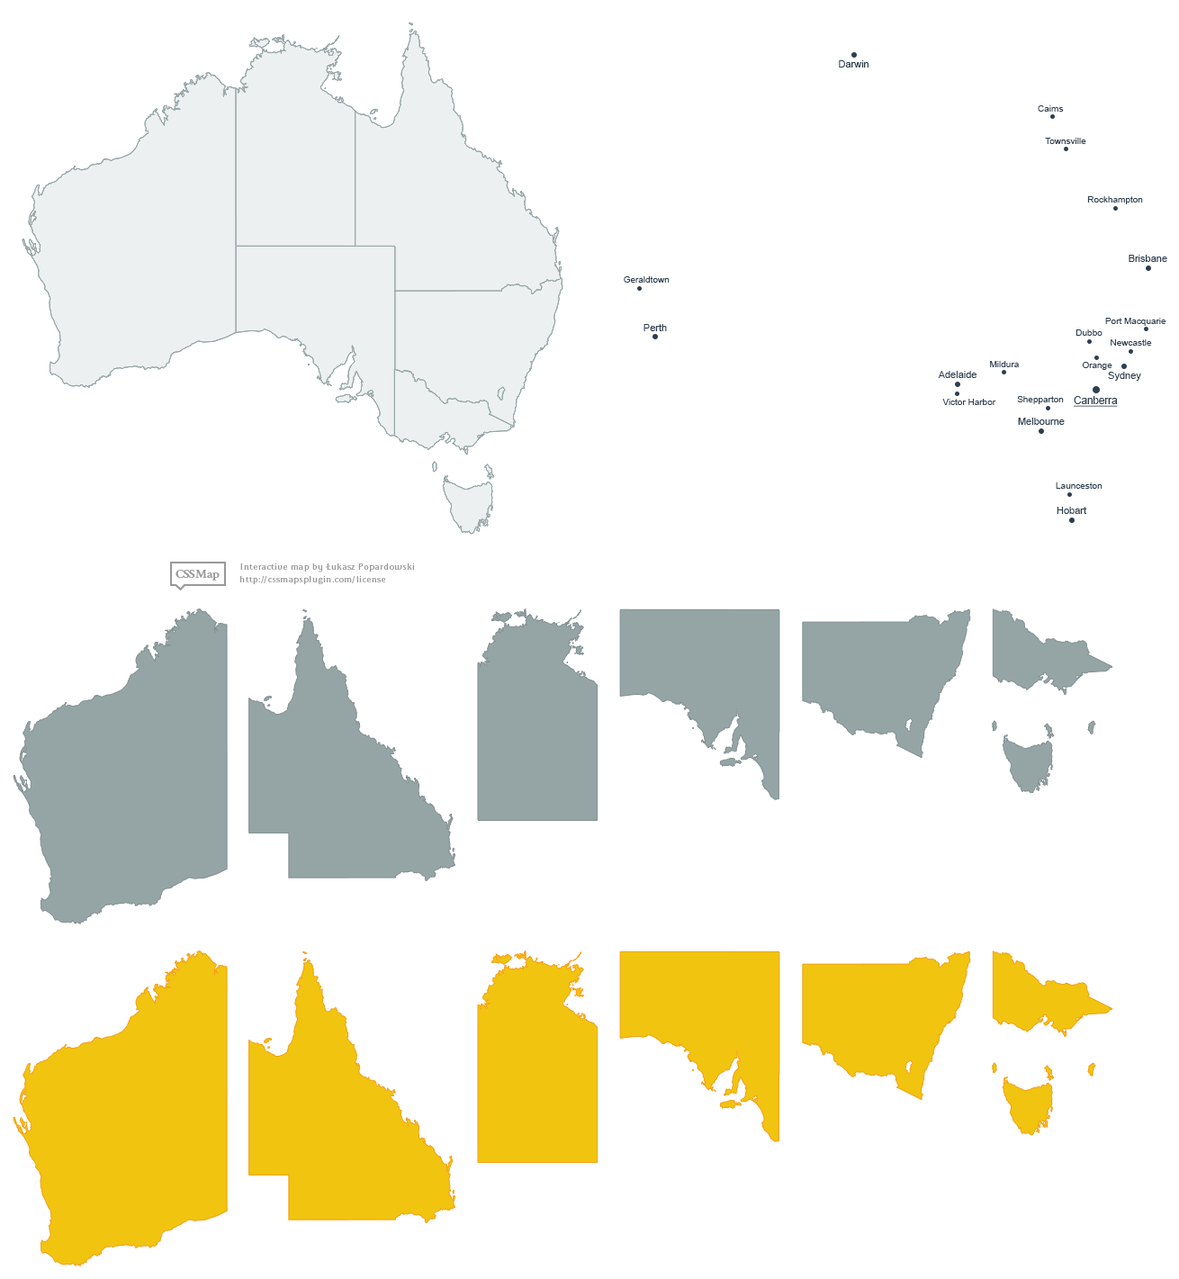
<style>
.page{position:relative;width:1179px;height:1279px;background:#ffffff}
.page>*{position:absolute;margin:0}
.t1{font:9.9px "ArialMT";color:#2c3e50}
.t2{font:9px "ArialMT";color:#2c3e50}
.t3{font:10.8px "ArialMT";color:#2c3e50;text-decoration:underline;scale:0.97 1}
</style>
<div class="page">
<p class="t1" style="left:839px;top:60px;width:29px;height:7px">Darwin</p>
<p class="t2" style="left:1038px;top:105px;width:26px;height:7px">Caims</p>
<p class="t2" style="left:1045px;top:138px;width:41px;height:6px">Townsville</p>
<p class="t2" style="left:1087px;top:196px;width:56px;height:8px">Rockhampton</p>
<p class="t1" style="left:1129px;top:255px;width:38px;height:7px">Brisbane</p>
<p class="t2" style="left:624px;top:276px;width:46px;height:7px">Geraldtown</p>
<p class="t2" style="left:1105px;top:318px;width:61px;height:8px">Port Macquarie</p>
<p class="t1" style="left:643px;top:324px;width:24px;height:7px">Perth</p>
<p class="t2" style="left:1075px;top:329px;width:27px;height:7px">Dubbo</p>
<p class="t2" style="left:1111px;top:339px;width:41px;height:7px">Newcastle</p>
<p class="t2" style="left:990px;top:361px;width:29px;height:6px">Mildura</p>
<p class="t2" style="left:1082px;top:362px;width:30px;height:8px">Orange</p>
<p class="t1" style="left:938px;top:371px;width:38px;height:7px">Adelaide</p>
<p class="t1" style="left:1108px;top:372px;width:33px;height:9px">Sydney</p>
<p class="t2" style="left:942px;top:399px;width:54px;height:6px">Victor Harbor</p>
<p class="t2" style="left:1017px;top:396px;width:47px;height:8px">Shepparton</p>
<p class="t3" style="left:1074px;top:396px;width:44px;height:11px">Canberra</p>
<p class="t1" style="left:1018px;top:418px;width:47px;height:7px">Melbourne</p>
<p class="t2" style="left:1056px;top:482px;width:46px;height:7px">Launceston</p>
<p class="t1" style="left:1057px;top:507px;width:29px;height:7px">Hobart</p>
</div>
